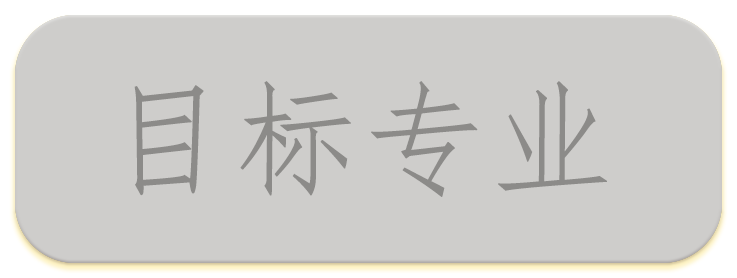
<style>
.page{position:relative;width:737px;height:278px;background:#cecdcb}
.page>*{position:absolute;margin:0}
.t1{font:125px "FangSong";color:#8c8b89;font-weight:bold}
</style>
<div class="page">
<p class="t1" style="left:134px;top:81px;width:473px;height:116px">目标专业</p>
</div>
